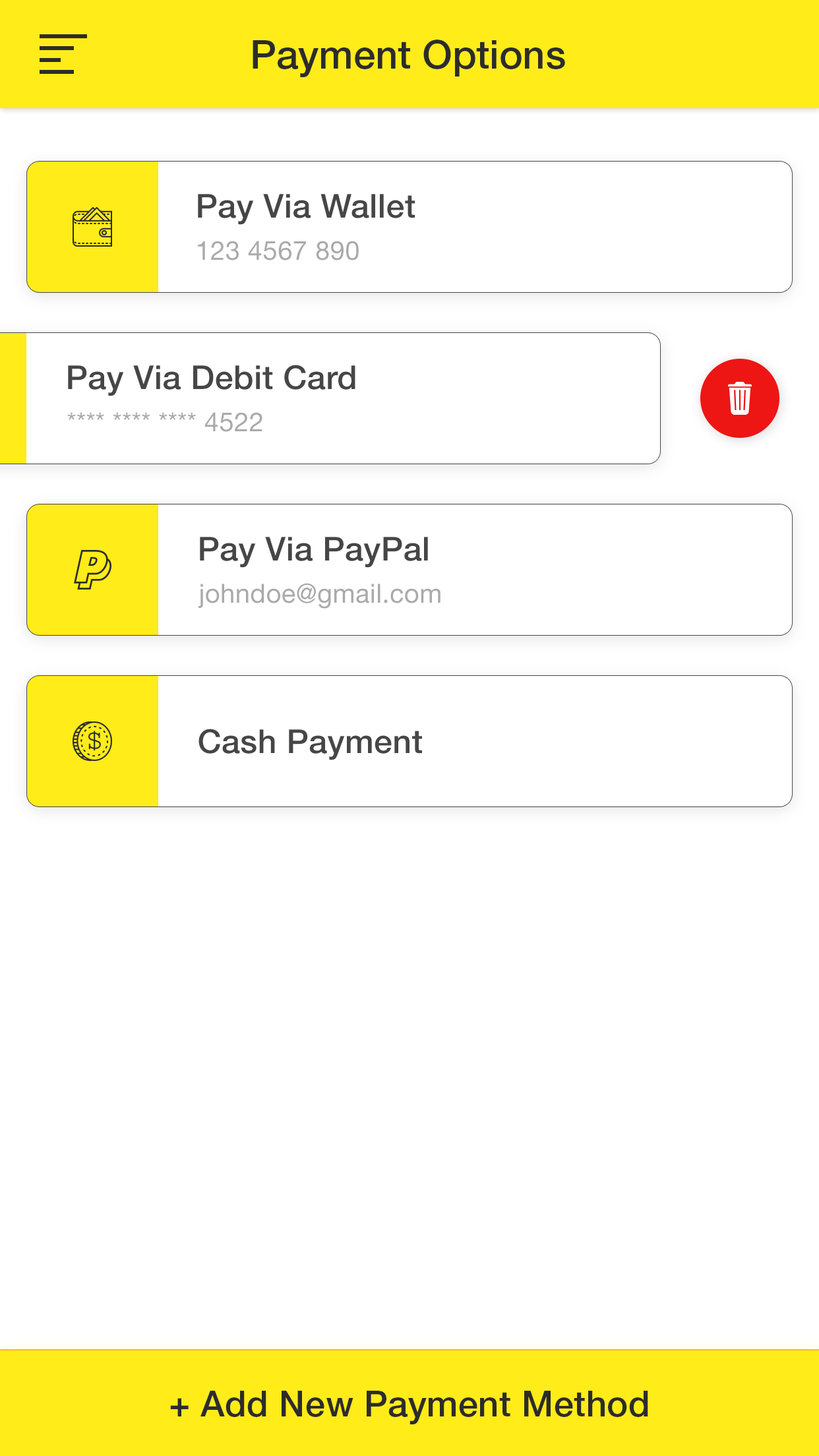
<style>
.page{position:relative;width:819px;height:1456px;background:#ffffff}
.page>*{position:absolute;margin:0}
.t1{font:39.6px "HelveticaNeueLTStd-Md";color:#2c2c2c}
.t2{font:33px "HelveticaNeueLTStd-Md";letter-spacing:0.01em;color:#464646}
.t3{font:26.4px "HelveticaNeueLTStd-Roman";letter-spacing:0.01em;color:#aaaaaa}
.t4{font:35.6px "HelveticaNeueLTStd-Md";letter-spacing:0.01em;color:#2c2c2c}
</style>
<div class="page">
<p class="t1" style="left:253px;top:40px;width:312px;height:37px">Payment Options</p>
<p class="t2" style="left:198px;top:194px;width:217px;height:31px">Pay Via Wallet</p>
<p class="t3" style="left:198px;top:241px;width:161px;height:19px">123 4567 890</p>
<p class="t2" style="left:68px;top:365px;width:287px;height:31px">Pay Via Debit Card</p>
<p class="t3" style="left:67px;top:412px;width:195px;height:20px">**** **** **** 4522</p>
<p class="t2" style="left:200px;top:537px;width:228px;height:31px">Pay Via PayPal</p>
<p class="t3" style="left:198px;top:583px;width:242px;height:26px">johndoe@gmail.com</p>
<p class="t2" style="left:198px;top:729px;width:224px;height:31px">Cash Payment</p>
<p class="t4" style="left:170px;top:1391px;width:478px;height:33px">+ Add New Payment Method</p>
</div>
